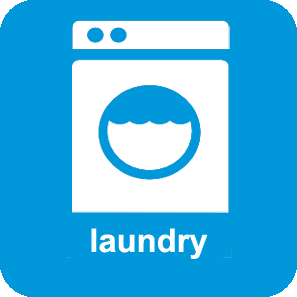
<style>
.page{position:relative;width:297px;height:297px;background:#0098da}
.page>*{position:absolute;margin:0}
.t1{font:32.8px "Arial-BoldMT";color:#fcfefe}
</style>
<div class="page">
<p class="t1" style="left:91px;top:228px;width:117px;height:31px">laundry</p>
</div>
